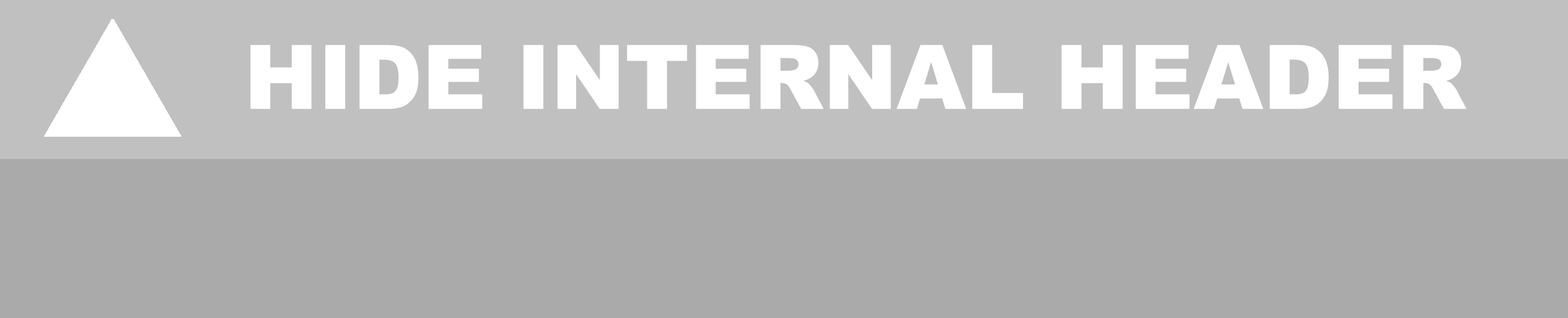
<style>
.page{position:relative;width:1568px;height:318px;background:#aaaaaa}
.page>*{position:absolute;margin:0}
.t1{font:89.1px "Arial-Black";color:#ffffff}
</style>
<div class="page">
<p class="t1" style="left:250px;top:45px;width:1217px;height:64px">HIDE INTERNAL HEADER</p>
</div>
